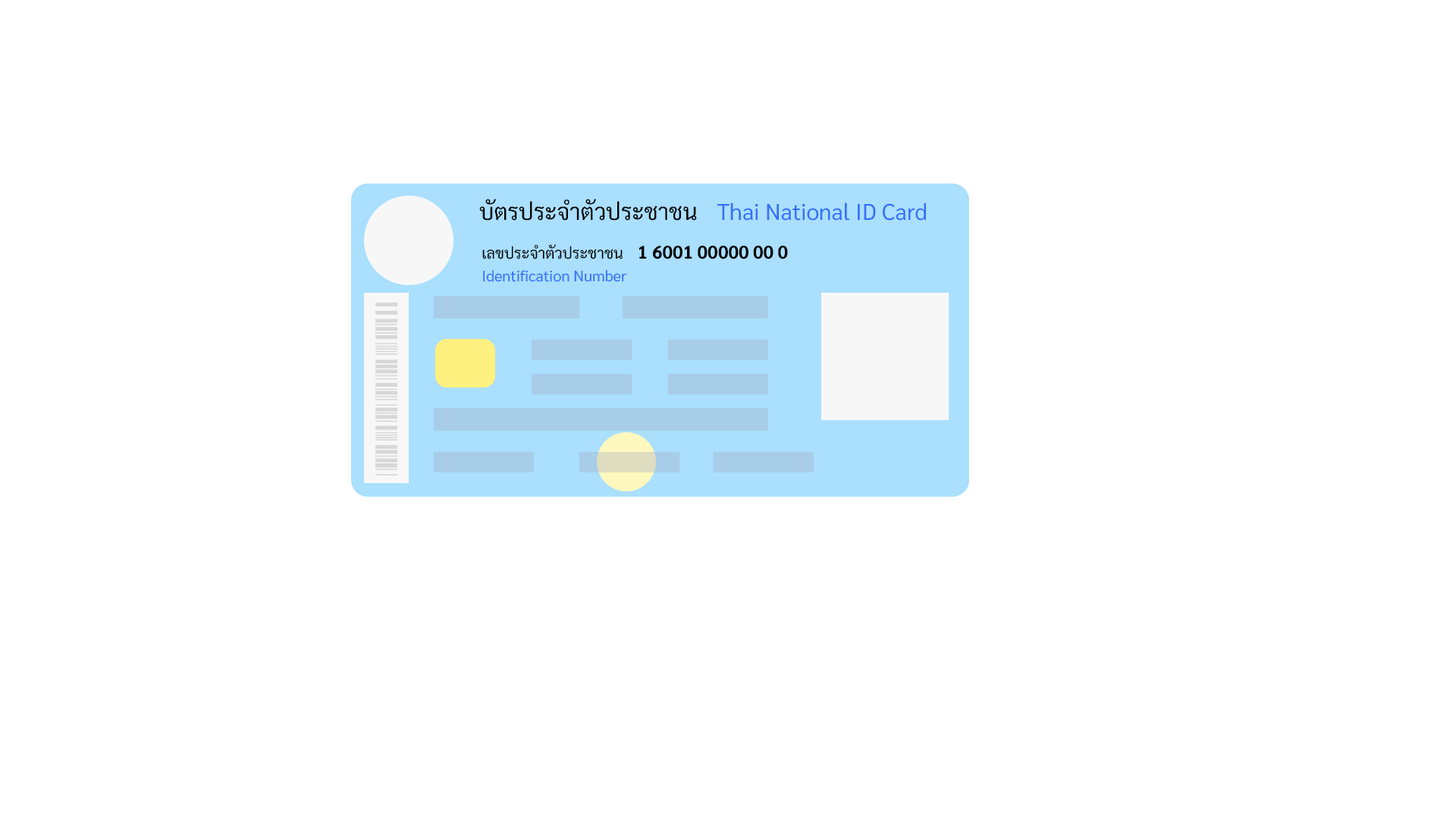
<style>
.page{position:relative;width:1456px;height:819px;background:#ffffff}
.page>*{position:absolute;margin:0}
.t1{font:22.7px "Sarabun-Regular";color:#000000}
.t2{font:22.7px "Sarabun-Regular";color:#3571f9}
.t3{font:15.2px "Sarabun-Regular";color:#000000}
.t4{font:18.2px "Sarabun-Bold";color:#000000}
.t5{font:15.2px "Sarabun-Regular";color:#3571f9}
</style>
<div class="page">
<p class="t1" style="left:479px;top:199px;width:218px;height:22px">บัตรประจำตัวประชาชน</p>
<p class="t2" style="left:717px;top:202px;width:209px;height:19px">Thai National ID Card</p>
<p class="t3" style="left:482px;top:244px;width:141px;height:15px">เลขประจำตัวประชาชน</p>
<p class="t4" style="left:639px;top:245px;width:149px;height:14px">1 6001 00000 00 0</p>
<p class="t5" style="left:483px;top:270px;width:143px;height:12px">Identification Number</p>
</div>
